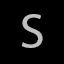
<style>
.page{position:relative;width:64px;height:64px;background:#000000}
.page>*{position:absolute;margin:0}
.t1{font:50px "MyriadPro-Regular";color:#bfbfbf}
</style>
<div class="page">
<p class="t1" style="left:21px;top:14px;width:22px;height:34px">S</p>
</div>
